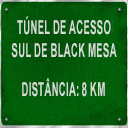
<style>
.page{position:relative;width:128px;height:128px}
.page>*{position:absolute;margin:0}
.t1{font:19px/23px "Arial-BoldMT";color:#d4ddd5;text-transform:uppercase;scale:0.5 1}
.t2{font:19px "Arial-BoldMT";color:#d4ded5;text-transform:uppercase;scale:0.5 1}
</style>
<div class="page">
<p class="t1" style="left:11px;top:16px;width:106px;height:42px;text-align:center">Túnel de acesso<br>sul de Black Mesa</p>
<p class="t2" style="left:22px;top:78px;width:83px;height:19px">Distância: 8 km</p>
</div>
